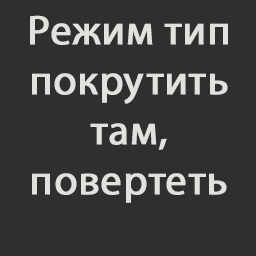
<style>
.page{position:relative;width:256px;height:256px;background:#2f2f2f}
.page>*{position:absolute;margin:0}
.t1{font:41.7px "MyriadPro-Regular";color:#e1e1de;font-weight:bold}
</style>
<div class="page">
<p class="t1" style="left:30px;top:15px;width:198px;height:188px;text-align:center">Режим тип покрутить там, повертеть</p>
</div>
